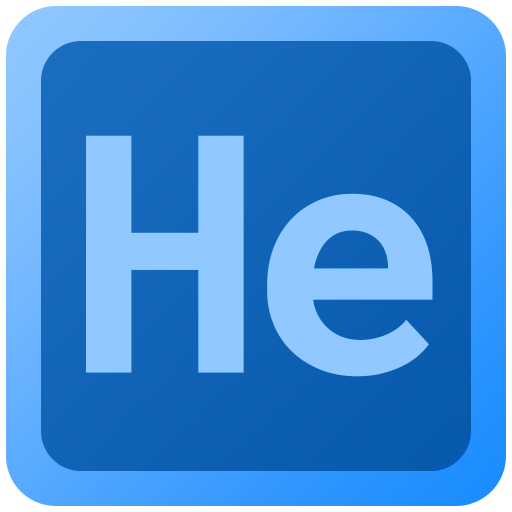
<style>
.page{position:relative;width:512px;height:512px}
.page>*{position:absolute;margin:0}
.t1{font:333.3px "RobotoMono-Bold";letter-spacing:-0.05em;color:#96c8fa}
</style>
<div class="page">
<p class="t1" style="left:86px;top:135px;width:347px;height:242px">He</p>
</div>
